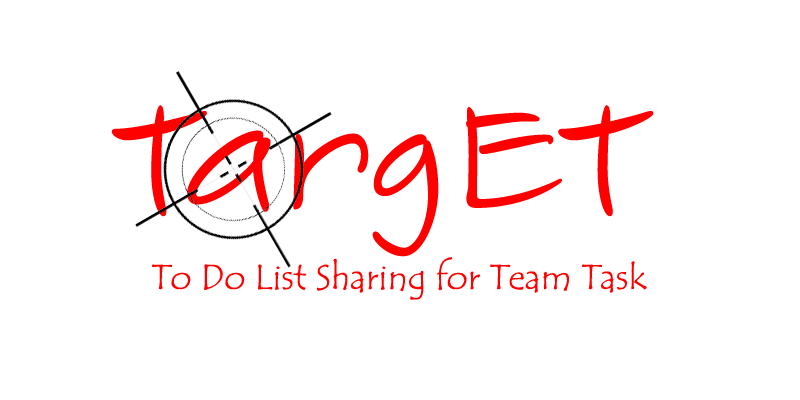
<style>
.page{position:relative;width:800px;height:400px;background:#ffffff}
.page>*{position:absolute;margin:0}
.t1{font:150px "SketchFlowPrint";color:#ff0000}
.t2{font:36px "TempusSansITC";color:#ff0000}
</style>
<div class="page">
<p class="t1" style="left:111px;top:105px;width:543px;height:152px">TargET</p>
<p class="t2" style="left:152px;top:257px;width:495px;height:43px">To Do List Sharing for Team Task</p>
</div>
